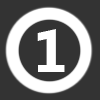
<style>
.page{position:relative;width:100px;height:100px;background:#333333}
.page>*{position:absolute;margin:0}
.t1{font:60px "SegoeUI-Bold";letter-spacing:-0.105em;color:#ffffff}
</style>
<div class="page">
<p class="t1" style="left:37px;top:29px;width:28px;height:43px">1</p>
</div>
